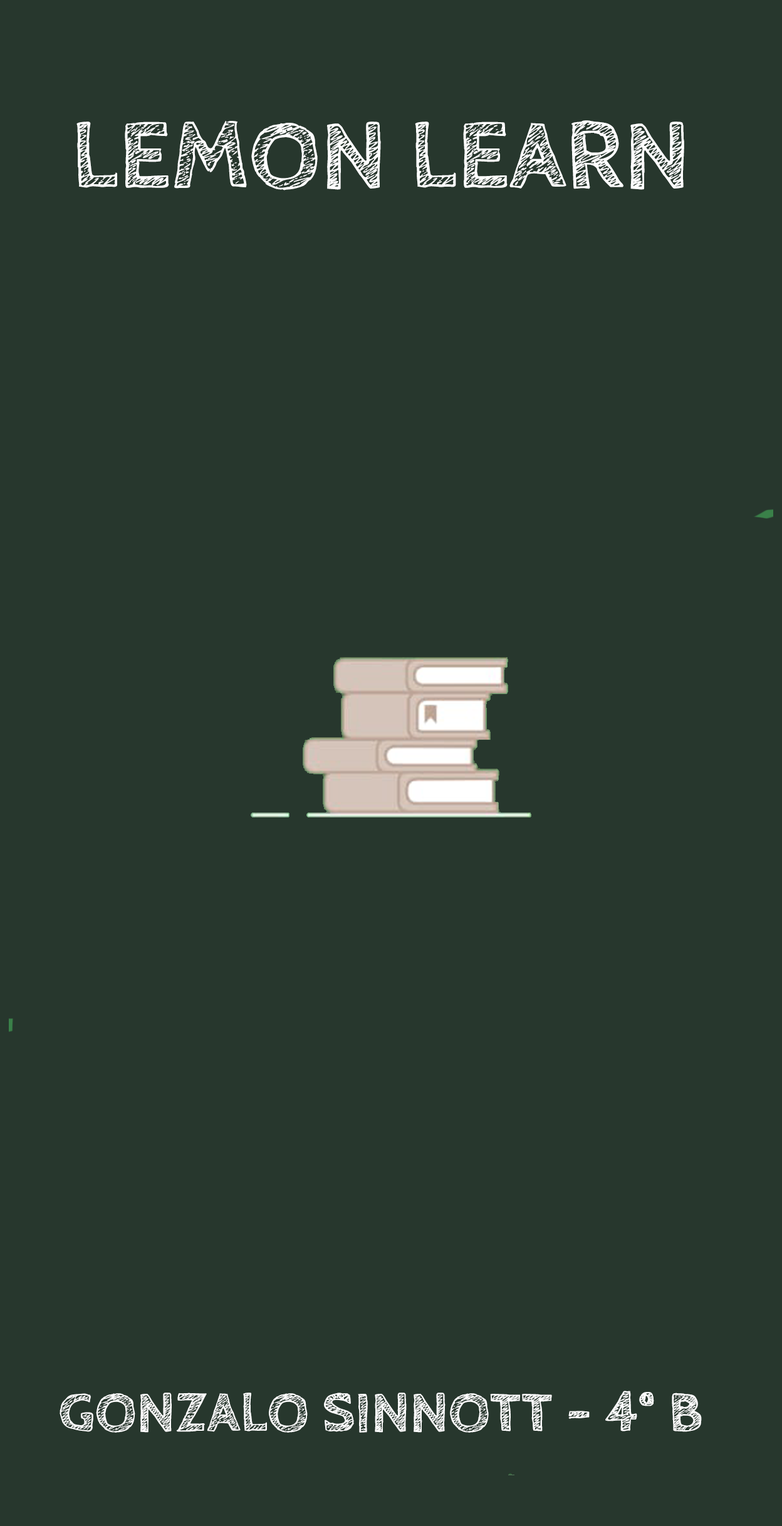
<style>
.page{position:relative;width:782px;height:1526px;background:#27372d}
.page>*{position:absolute;margin:0}
.t1{font:100.2px "CabinSketch-Bold";color:#ffffff}
.t2{font:58.5px "CabinSketch-Bold";color:#fefefe}
</style>
<div class="page">
<p class="t1" style="left:76px;top:120px;width:608px;height:70px">LEMON LEARN</p>
<p class="t2" style="left:59px;top:1390px;width:642px;height:42px">GONZALO SINNOTT - 4° B</p>
</div>
